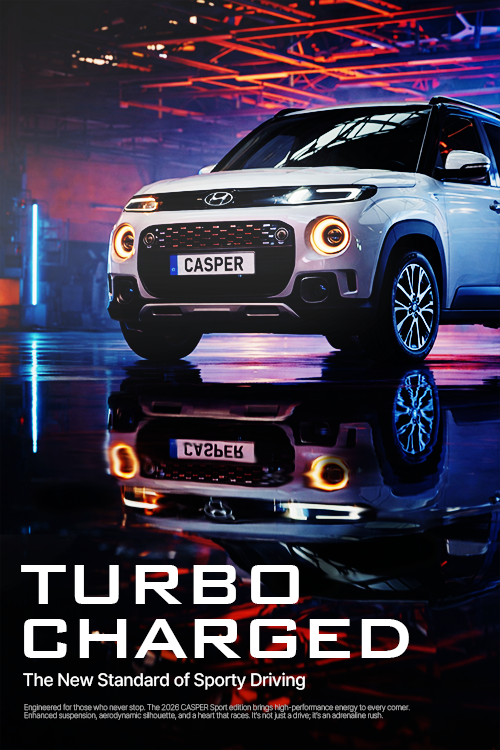
<style>
.page{position:relative;width:500px;height:750px}
.page>*{position:absolute;margin:0}
.t1{font:75px "BankGothicBT-Medium";letter-spacing:-0.025em;color:#ffffff}
.t2{font:75px "BankGothicBT-Medium";letter-spacing:-0.06em;color:#ffffff}
.t3{font:18px "Pretendard-Medium";letter-spacing:-0.02em;color:#ffffff}
.t4{font:8px/8px "Pretendard-Thin";letter-spacing:-0.02em;color:#b3b3b3}
</style>
<div class="page">
<p class="t1" style="left:21px;top:565px;width:278px;height:39px">TURBO</p>
<p class="t2" style="left:24px;top:619px;width:385px;height:39px">CHARGED</p>
<p class="t3" style="left:23px;top:672px;width:282px;height:18px">The New Standard of Sporty Driving</p>
<p class="t4" style="left:24px;top:703px;width:386px;height:17px">Engineered for those who never stop. The 2026 CASPER Sport edition brings high-performance energy to every corner. <br>Enhanced suspension, aerodynamic silhouette, and a heart that races. It’s not just a drive; it’s an adrenaline rush.</p>
</div>
